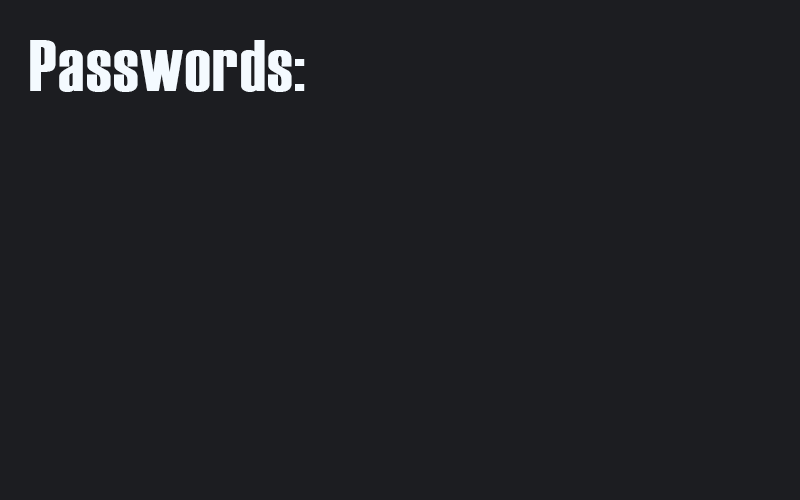
<style>
.page{position:relative;width:800px;height:500px;background:#1c1d21}
.page>*{position:absolute;margin:0}
.t1{font:72px "Haettenschweiler";letter-spacing:0.025em;color:#f4faff}
</style>
<div class="page">
<p class="t1" style="left:30px;top:40px;width:275px;height:52px">Passwords:</p>
</div>
